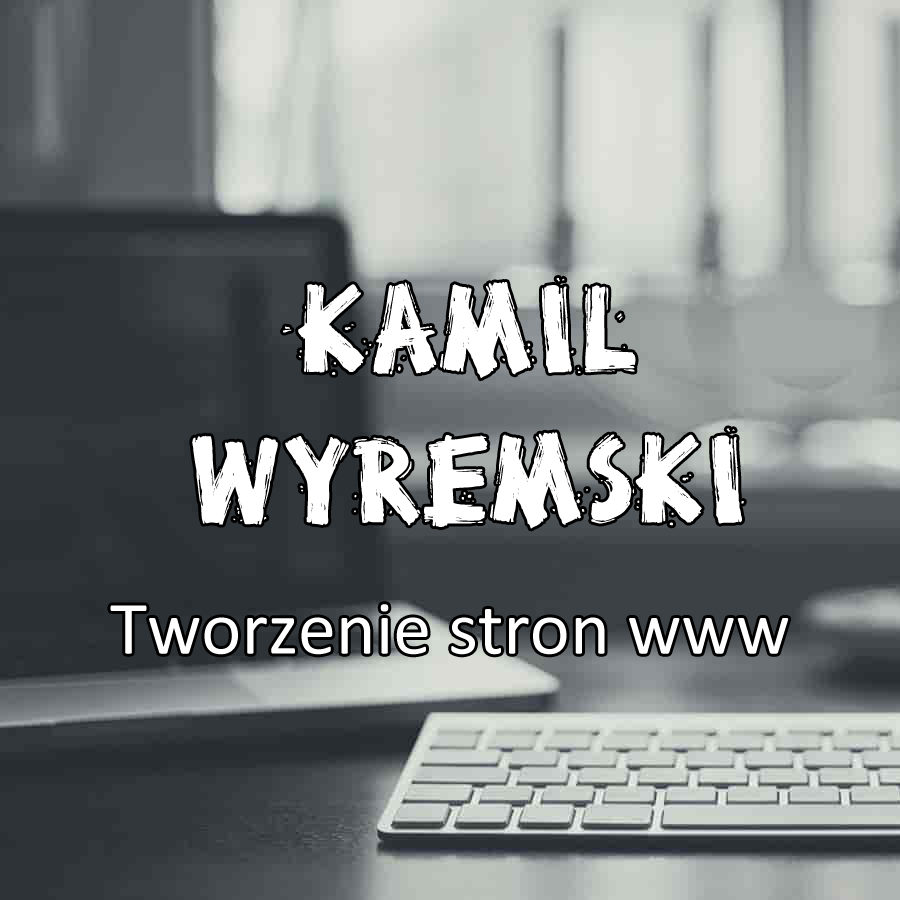
<style>
.page{position:relative;width:900px;height:900px}
.page>*{position:absolute;margin:0}
.t1{font:125.4px "BrokenStick";color:#ffffff}
.t2{font:76px "Calibri";color:#ffffff}
</style>
<div class="page">
<p class="t1" style="left:192px;top:278px;width:552px;height:251px;text-align:center">KAMIL<br>WYREMSKI</p>
<p class="t2" style="left:110px;top:604px;width:679px;height:51px">Tworzenie stron www</p>
</div>
